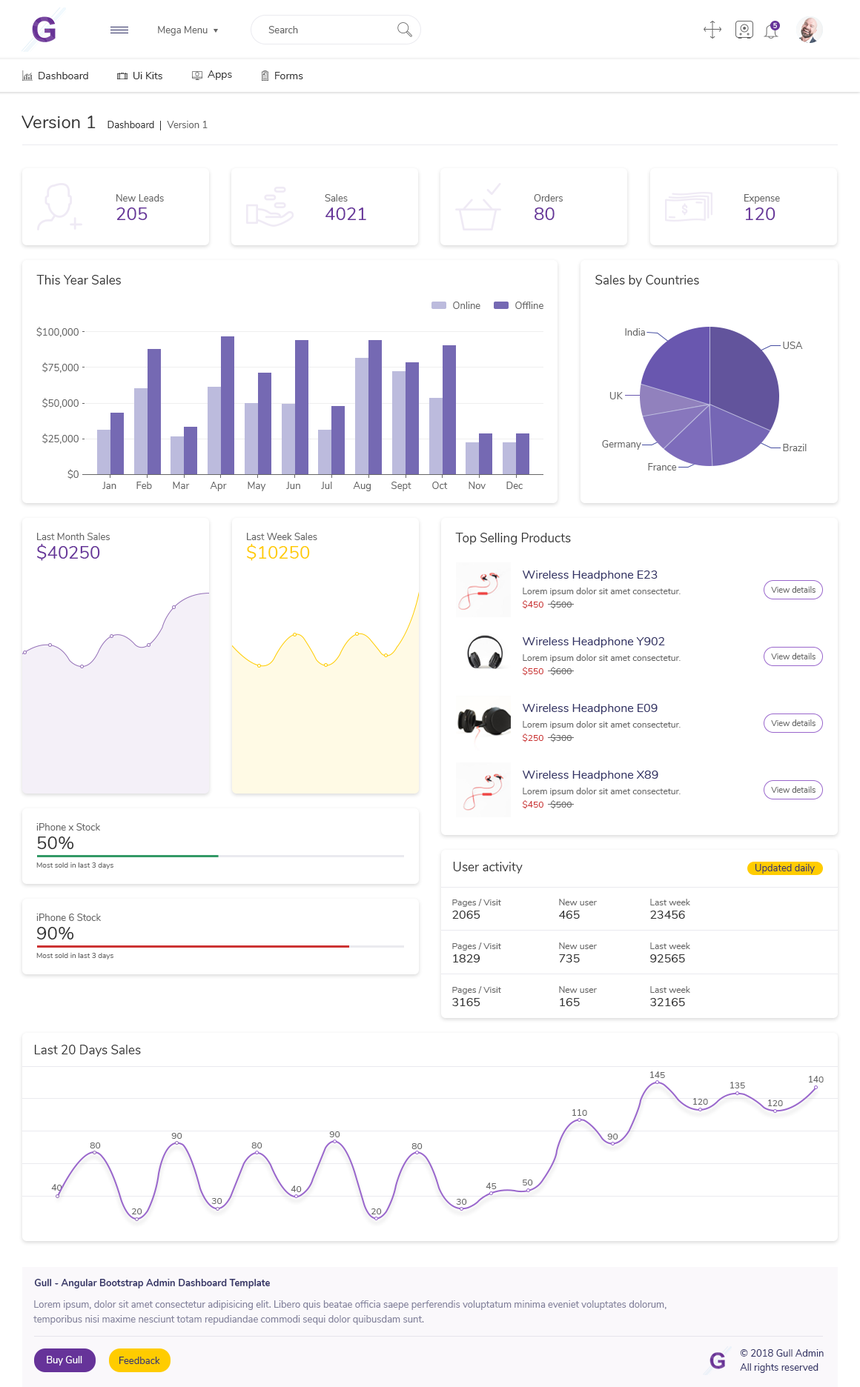
<style>
.page{position:relative;width:860px;height:1387px;background:#ffffff}
.page>*{position:absolute;margin:0}
.t1{font:9.6px "Nunito-Regular";color:#666666}
.t2{font:6.7px "Nunito-SemiBold";color:#ffffff}
.t3{font:10.4px "Nunito-Regular";color:#333333}
.t4{font:17.8px "Nunito-Regular";color:#333333}
.t5{font:9.6px "Nunito-Regular";color:#333333}
.t6{font:17.8px "Nunito-Regular";color:#663399}
.t7{font:12.6px "Nunito-Regular";color:#333333}
.t8{font:17.8px "Nunito-Regular";color:#ffcc00}
.t9{font:11.9px "Nunito-Regular";color:#333366}
.t10{font:8.9px "Nunito-Regular";color:#666666}
.t11{font:8.2px "Nunito-Regular";color:#666666}
.t12{font:8.9px "Nunito-Regular";color:#cc3333}
.t13{font:7.4px "Nunito-Regular";color:#666666}
.t14{font:9.6px "Nunito-Regular";color:#333366}
.t15{font:11.9px "Nunito-Regular";color:#333333}
.t16{font:9.6px "Nunito-Bold";color:#333366}
.t17{font:9.6px/14.8px "Nunito-Regular";color:#82819b}
.t18{font:9.6px "Nunito-Regular";color:#ffffff}
</style>
<div class="page">
<p class="t1" style="left:158px;top:26px;width:49px;height:10px">Mega Menu</p>
<p class="t1" style="left:268px;top:26px;width:30px;height:7px">Search</p>
<p class="t2" style="left:773px;top:23px;width:4px;height:5px">5</p>
<p class="t3" style="left:39px;top:72px;width:49px;height:7px">Dashboard</p>
<p class="t3" style="left:133px;top:72px;width:29px;height:7px">Ui Kits</p>
<p class="t3" style="left:207px;top:70px;width:25px;height:10px">Apps</p>
<p class="t3" style="left:275px;top:72px;width:28px;height:7px">Forms</p>
<p class="t4" style="left:21px;top:116px;width:75px;height:12px">Version 1</p>
<p class="t5" style="left:107px;top:121px;width:47px;height:7px">Dashboard</p>
<p class="t1" style="left:167px;top:121px;width:40px;height:7px">Version 1</p>
<p class="t1" style="left:116px;top:194px;width:48px;height:8px">New Leads</p>
<p class="t1" style="left:325px;top:194px;width:23px;height:8px">Sales</p>
<p class="t1" style="left:534px;top:194px;width:28px;height:8px">Orders</p>
<p class="t1" style="left:744px;top:194px;width:36px;height:10px">Expense</p>
<p class="t6" style="left:116px;top:207px;width:31px;height:13px">205</p>
<p class="t6" style="left:325px;top:207px;width:41px;height:13px">4021</p>
<p class="t6" style="left:534px;top:207px;width:20px;height:13px">80</p>
<p class="t6" style="left:745px;top:207px;width:30px;height:13px">120</p>
<p class="t7" style="left:36px;top:275px;width:85px;height:10px">This Year Sales</p>
<p class="t7" style="left:595px;top:275px;width:104px;height:12px">Sales by Countries</p>
<p class="t1" style="left:453px;top:302px;width:27px;height:7px">Online</p>
<p class="t1" style="left:515px;top:302px;width:28px;height:7px">Offline</p>
<p class="t1" style="left:36px;top:327px;width:43px;height:10px">$100,000</p>
<p class="t1" style="left:625px;top:328px;width:20px;height:8px">India</p>
<p class="t1" style="left:783px;top:342px;width:20px;height:7px">USA</p>
<p class="t1" style="left:42px;top:362px;width:37px;height:11px">$75,000</p>
<p class="t1" style="left:42px;top:398px;width:37px;height:10px">$50,000</p>
<p class="t1" style="left:609px;top:392px;width:13px;height:7px">UK</p>
<p class="t1" style="left:42px;top:434px;width:37px;height:10px">$25,000</p>
<p class="t1" style="left:602px;top:440px;width:39px;height:10px">Germany</p>
<p class="t1" style="left:783px;top:444px;width:23px;height:7px">Brazil</p>
<p class="t1" style="left:67px;top:469px;width:12px;height:10px">$0</p>
<p class="t1" style="left:648px;top:463px;width:29px;height:8px">France</p>
<p class="t1" style="left:102px;top:482px;width:14px;height:7px">Jan</p>
<p class="t1" style="left:136px;top:482px;width:16px;height:7px">Feb</p>
<p class="t1" style="left:173px;top:482px;width:17px;height:7px">Mar</p>
<p class="t1" style="left:210px;top:482px;width:17px;height:9px">Apr</p>
<p class="t1" style="left:248px;top:482px;width:18px;height:9px">May</p>
<p class="t1" style="left:286px;top:482px;width:14px;height:7px">Jun</p>
<p class="t1" style="left:321px;top:482px;width:11px;height:7px">Jul</p>
<p class="t1" style="left:353px;top:482px;width:18px;height:9px">Aug</p>
<p class="t1" style="left:391px;top:482px;width:20px;height:9px">Sept</p>
<p class="t1" style="left:432px;top:482px;width:16px;height:7px">Oct</p>
<p class="t1" style="left:468px;top:482px;width:17px;height:7px">Nov</p>
<p class="t1" style="left:506px;top:482px;width:16px;height:7px">Dec</p>
<p class="t1" style="left:37px;top:533px;width:73px;height:7px">Last Month Sales</p>
<p class="t1" style="left:247px;top:533px;width:70px;height:7px">Last Week Sales</p>
<p class="t7" style="left:455px;top:533px;width:116px;height:12px">Top Selling Products</p>
<p class="t6" style="left:37px;top:544px;width:63px;height:17px">$40250</p>
<p class="t8" style="left:247px;top:544px;width:63px;height:17px">$10250</p>
<p class="t9" style="left:522px;top:571px;width:135px;height:10px">Wireless Headphone E23</p>
<p class="t10" style="left:522px;top:588px;width:158px;height:8px">Lorem ipsum dolor sit amet consectetur.</p>
<p class="t11" style="left:771px;top:586px;width:44px;height:7px">View details</p>
<p class="t12" style="left:522px;top:600px;width:21px;height:9px">$450</p>
<p class="t10" style="left:550px;top:600px;width:21px;height:9px">$500</p>
<p class="t9" style="left:522px;top:637px;width:143px;height:11px">Wireless Headphone Y902</p>
<p class="t11" style="left:771px;top:653px;width:44px;height:7px">View details</p>
<p class="t10" style="left:522px;top:654px;width:158px;height:8px">Lorem ipsum dolor sit amet consectetur.</p>
<p class="t12" style="left:522px;top:667px;width:21px;height:9px">$550</p>
<p class="t10" style="left:550px;top:667px;width:21px;height:9px">$600</p>
<p class="t9" style="left:522px;top:704px;width:135px;height:10px">Wireless Headphone E09</p>
<p class="t10" style="left:522px;top:721px;width:158px;height:8px">Lorem ipsum dolor sit amet consectetur.</p>
<p class="t11" style="left:771px;top:720px;width:44px;height:6px">View details</p>
<p class="t12" style="left:522px;top:734px;width:21px;height:9px">$250</p>
<p class="t10" style="left:550px;top:734px;width:21px;height:9px">$300</p>
<p class="t9" style="left:522px;top:771px;width:136px;height:10px">Wireless Headphone X89</p>
<p class="t10" style="left:522px;top:788px;width:158px;height:8px">Lorem ipsum dolor sit amet consectetur.</p>
<p class="t11" style="left:771px;top:786px;width:44px;height:7px">View details</p>
<p class="t12" style="left:522px;top:800px;width:21px;height:9px">$450</p>
<p class="t10" style="left:550px;top:800px;width:21px;height:9px">$500</p>
<p class="t1" style="left:36px;top:823px;width:64px;height:8px">iPhone x Stock</p>
<p class="t4" style="left:37px;top:837px;width:37px;height:12px">50%</p>
<p class="t13" style="left:36px;top:863px;width:77px;height:6px">Most sold in last 3 days</p>
<p class="t7" style="left:453px;top:862px;width:69px;height:12px">User activity</p>
<p class="t14" style="left:754px;top:864px;width:60px;height:10px">Updated daily</p>
<p class="t10" style="left:452px;top:899px;width:49px;height:8px">Pages / Visit</p>
<p class="t10" style="left:559px;top:899px;width:38px;height:7px">New user</p>
<p class="t10" style="left:650px;top:899px;width:40px;height:7px">Last week</p>
<p class="t1" style="left:36px;top:914px;width:65px;height:7px">iPhone 6 Stock</p>
<p class="t15" style="left:452px;top:911px;width:28px;height:8px">2065</p>
<p class="t15" style="left:559px;top:911px;width:20px;height:8px">465</p>
<p class="t15" style="left:650px;top:911px;width:35px;height:8px">23456</p>
<p class="t4" style="left:37px;top:927px;width:37px;height:13px">90%</p>
<p class="t13" style="left:36px;top:953px;width:77px;height:7px">Most sold in last 3 days</p>
<p class="t10" style="left:452px;top:943px;width:49px;height:8px">Pages / Visit</p>
<p class="t10" style="left:559px;top:943px;width:38px;height:6px">New user</p>
<p class="t10" style="left:650px;top:943px;width:40px;height:6px">Last week</p>
<p class="t15" style="left:453px;top:954px;width:27px;height:9px">1829</p>
<p class="t15" style="left:559px;top:954px;width:20px;height:9px">735</p>
<p class="t15" style="left:650px;top:954px;width:35px;height:9px">92565</p>
<p class="t10" style="left:452px;top:986px;width:49px;height:8px">Pages / Visit</p>
<p class="t10" style="left:559px;top:986px;width:38px;height:7px">New user</p>
<p class="t10" style="left:650px;top:986px;width:40px;height:7px">Last week</p>
<p class="t15" style="left:452px;top:998px;width:28px;height:8px">3165</p>
<p class="t15" style="left:559px;top:998px;width:20px;height:8px">165</p>
<p class="t15" style="left:650px;top:998px;width:35px;height:8px">32165</p>
<p class="t7" style="left:34px;top:1045px;width:107px;height:12px">Last 20 Days Sales</p>
<p class="t10" style="left:650px;top:1072px;width:15px;height:6px">145</p>
<p class="t10" style="left:730px;top:1082px;width:15px;height:7px">135</p>
<p class="t10" style="left:808px;top:1076px;width:15px;height:7px">140</p>
<p class="t10" style="left:572px;top:1109px;width:15px;height:7px">110</p>
<p class="t10" style="left:693px;top:1098px;width:15px;height:7px">120</p>
<p class="t10" style="left:768px;top:1100px;width:15px;height:6px">120</p>
<p class="t10" style="left:171px;top:1133px;width:11px;height:6px">90</p>
<p class="t10" style="left:329px;top:1132px;width:11px;height:5px">90</p>
<p class="t10" style="left:607px;top:1134px;width:11px;height:6px">90</p>
<p class="t10" style="left:90px;top:1143px;width:11px;height:6px">80</p>
<p class="t10" style="left:251px;top:1143px;width:11px;height:6px">80</p>
<p class="t10" style="left:411px;top:1143px;width:11px;height:6px">80</p>
<p class="t10" style="left:522px;top:1180px;width:11px;height:6px">50</p>
<p class="t10" style="left:51px;top:1184px;width:11px;height:7px">40</p>
<p class="t10" style="left:290px;top:1186px;width:12px;height:6px">40</p>
<p class="t10" style="left:485px;top:1183px;width:11px;height:6px">45</p>
<p class="t10" style="left:211px;top:1198px;width:11px;height:6px">30</p>
<p class="t10" style="left:456px;top:1199px;width:11px;height:6px">30</p>
<p class="t10" style="left:131px;top:1209px;width:11px;height:6px">20</p>
<p class="t10" style="left:371px;top:1209px;width:11px;height:6px">20</p>
<p class="t16" style="left:34px;top:1279px;width:236px;height:10px">Gull - Angular Bootstrap Admin Dashboard Template</p>
<p class="t17" style="left:33px;top:1301px;width:633px;height:24px">Lorem ipsum, dolor sit amet consectetur adipisicing elit. Libero quis beatae officia saepe perferendis voluptatum minima eveniet voluptates dolorum, <br>temporibus nisi maxime nesciunt totam repudiandae commodi sequi dolor quibusdam sunt.</p>
<p class="t14" style="left:740px;top:1349px;width:83px;height:8px">© 2018 Gull Admin</p>
<p class="t18" style="left:47px;top:1356px;width:35px;height:10px">Buy Gull</p>
<p class="t14" style="left:119px;top:1357px;width:41px;height:7px">Feedback</p>
<p class="t14" style="left:740px;top:1363px;width:78px;height:10px">All rights reserved</p>
</div>
